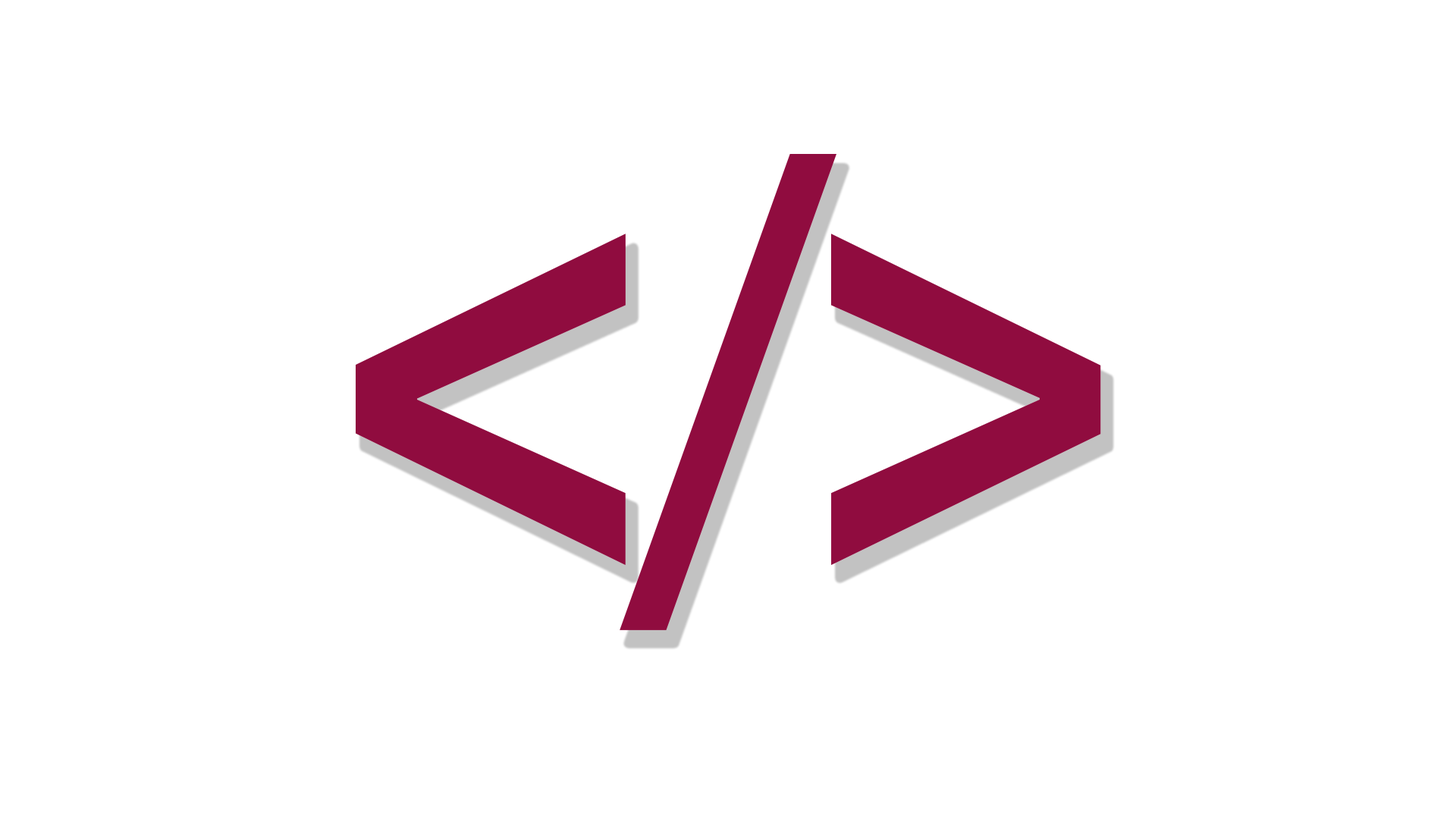
<style>
.page{position:relative;width:1456px;height:819px;background:#ffffff}
.page>*{position:absolute;margin:0}
.t1{font:552.9px "StencilStd";letter-spacing:-0.02em;color:#900c3f}
</style>
<div class="page">
<p class="t1" style="left:356px;top:154px;width:745px;height:476px">&lt;/&gt;</p>
</div>
